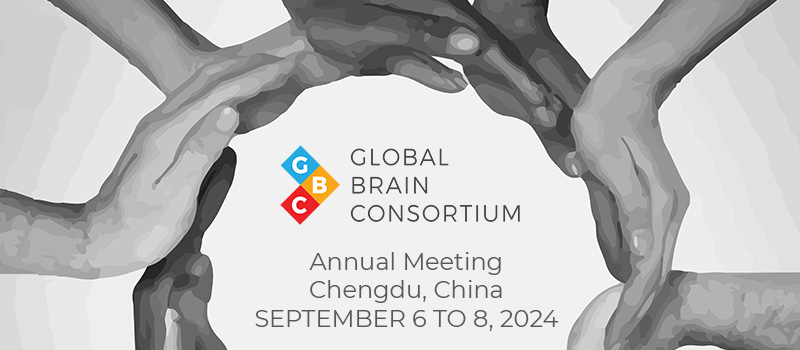
<style>
.page{position:relative;width:800px;height:350px;background:#f1f1f1}
.page>*{position:absolute;margin:0}
.t1{font:24px "Montserrat-Regular";color:#585858}
</style>
<div class="page">
<p class="t1" style="left:255px;top:252px;width:304px;height:79px;text-align:center">Annual Meeting<br>Chengdu, China<br>SEPTEMBER 6 TO 8, 2024</p>
</div>
